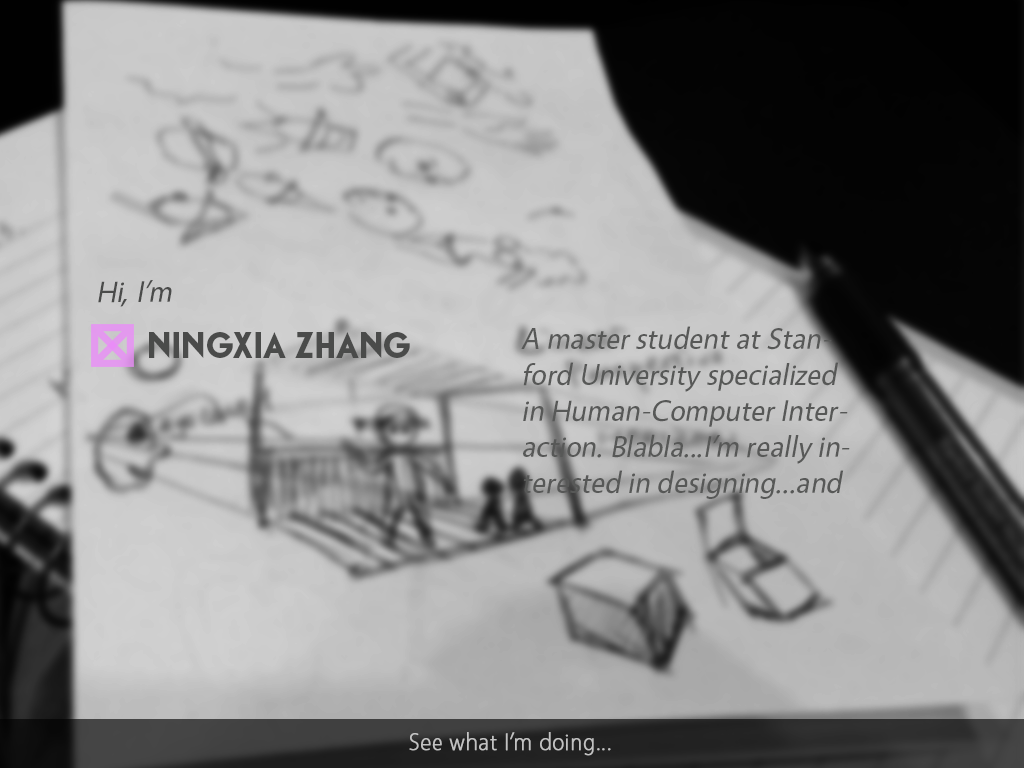
<style>
.page{position:relative;width:1024px;height:768px}
.page>*{position:absolute;margin:0}
.t1{font:30px "Vegur-Regular";color:#4a4b4a;font-style:italic}
.t2{font:30px "Vegur-Regular";color:#575857;font-style:italic}
.t3{font:36px "Cassannet-Bold";color:#4a4b4a}
.t4{font:24px "Vegur-Light";color:#c2c2c2;font-weight:bold}
</style>
<div class="page">
<p class="t1" style="left:98px;top:280px;width:74px;height:27px">Hi, I’m</p>
<p class="t2" style="left:521px;top:326px;width:329px;height:173px">A master student at Stanford University specialized in Human-Computer Interaction. Blabla...I’m really interested in designing...and</p>
<p class="t3" style="left:149px;top:332px;width:261px;height:26px">NINGXIA ZHANG</p>
<p class="t4" style="left:409px;top:732px;width:202px;height:24px">See what I’m doing...</p>
</div>
